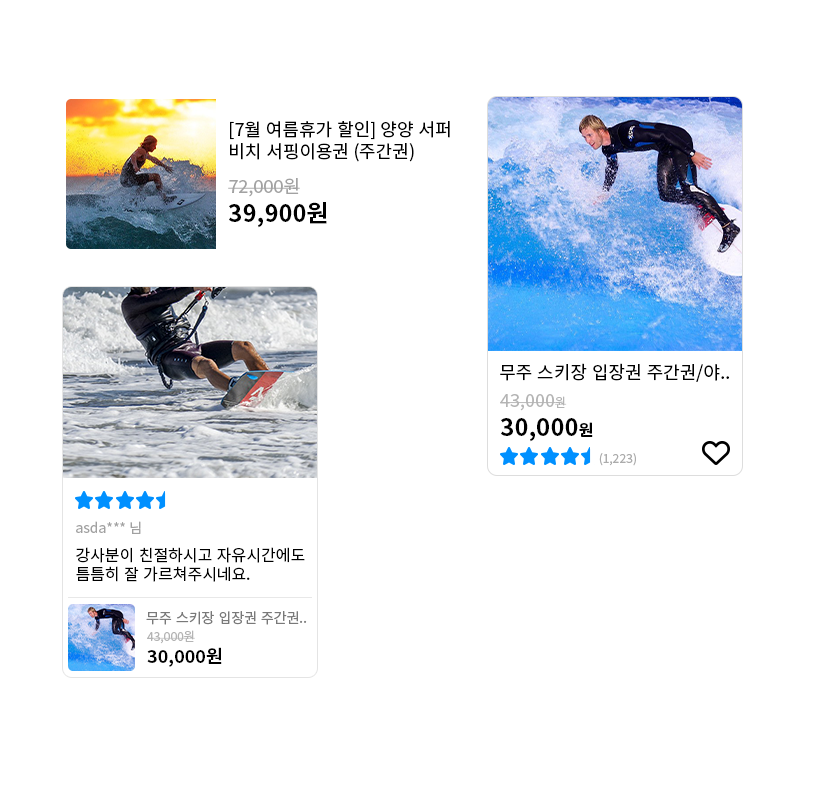
<style>
.page{position:relative;width:828px;height:792px;background:#ffffff}
.page>*{position:absolute;margin:0}
.t1{font:18px "NotoSansKR-Regular";color:#000000}
.t2{font:18px/35px "NotoSansKR-Regular";color:#a2a2a2}
.t3{font:24px "NotoSansKR-Bold";color:#000000}
.t4{font:18px "NotoSansKR-Regular";color:#b4b4b4}
.t5{font:12px "NotoSansKR-Regular";color:#b4b4b4}
.t6{font:16px "NotoSansKR-Bold";color:#000000}
.t7{font:12px "NotoSansKR-Regular";color:#acacac}
.t8{font:16px "NotoSansKR-Regular";color:#000000}
.t9{font:14px "NotoSansKR-Regular";color:#a1a1a1}
.t10{font:16px/28px "NotoSansKR-Regular";color:#000000}
.t11{font:14px "NotoSansKR-Regular";color:#797979}
.t12{font:18px "NotoSansKR-Bold";color:#000000}
</style>
<div class="page">
<p class="t1" style="left:228px;top:120px;width:222px;height:108px">[7월 여름휴가 할인] 양양 서퍼<br>비치 서핑이용권 (주간권)<br><span class="t2">72,000원<br></span><span class="t3">39,900원</span></p>
<p class="t1" style="left:500px;top:363px;width:229px;height:19px">무주 스키장 입장권 주간권/야..</p>
<p class="t4" style="left:500px;top:394px;width:93px;height:48px">４3,000<span class="t5">원<br></span><span class="t3">30,000</span><span class="t6">원</span></p>
<p class="t7" style="left:599px;top:453px;width:37px;height:13px">(1,223)</p>
<p class="t8" style="left:76px;top:521px;width:229px;height:61px"><span class="t9">asda*** 님<br></span>강<span class="t10">사분이 친절하</span>시고 자유시간에도 <br>틈틈히 잘 가르쳐주시네요.</p>
<p class="t11" style="left:146px;top:611px;width:161px;height:14px">무주 스키장 입장권 주간권..</p>
<p class="t5" style="left:147px;top:630px;width:75px;height:37px">４3,000원<br><span class="t12">30,000원</span></p>
</div>
